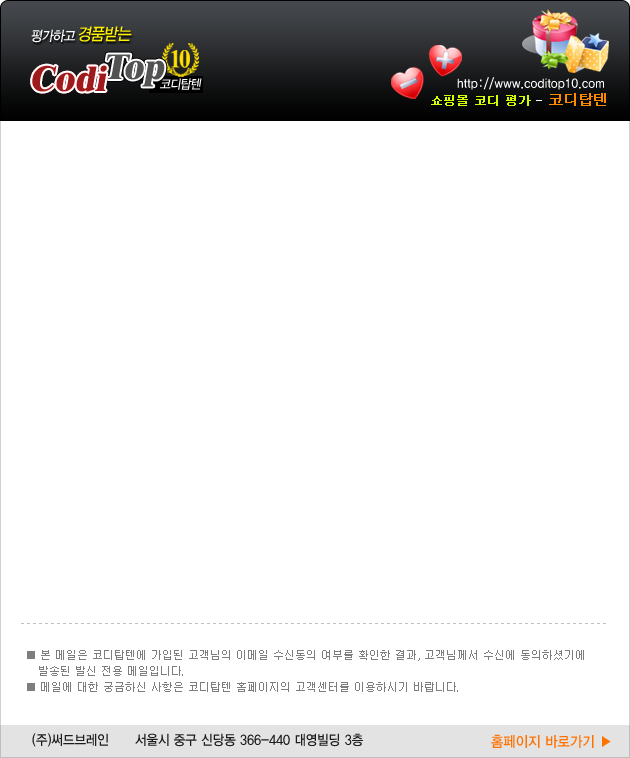
<style>
.page{position:relative;width:630px;height:758px;background:#ffffff}
.page>*{position:absolute;margin:0}
.t1{font:14px "YDIYGO330";letter-spacing:-0.05em;color:#ffffff;font-style:italic;scale:0.9 1}
.t2{font:17px "YDIYGO330";letter-spacing:-0.05em;color:#fff000;font-style:italic;scale:0.9 1}
.t3{font:36px "Dutch801BT-ExtraBold";color:#9e1b1d;font-style:italic}
.t4{font:13px "YDIYGO330";letter-spacing:-0.05em;color:#ffffff;font-style:italic;scale:0.9 1}
.t5{font:12.7px "YDIYGO330";letter-spacing:0.025em;color:#ffffff;scale:0.91 1}
.t6{font:12px "Dotum";color:#d2ff00;font-weight:bold}
.t7{font:11px "Dotum";color:#ffffff;font-weight:bold}
.t8{font:14px "Dotum";color:#ff8a00;font-weight:bold}
.t9{font:11px/16px "Dotum";color:#7d7d7d}
.t10{font:13.8px "YDIYGO330";color:#1d1d1d;scale:0.91 1}
.t11{font:14.8px "YDIYGO330";color:#ff7200;scale:0.91 1}
</style>
<div class="page">
<p class="t1" style="left:31px;top:29px;width:44px;height:14px">평가하고</p>
<p class="t2" style="left:78px;top:26px;width:54px;height:16px">경품받는</p>
<p class="t3" style="left:32px;top:65px;width:75px;height:27px">Codi</p>
<p class="t3" style="left:32px;top:65px;width:75px;height:27px">Codi</p>
<p class="t4" style="left:160px;top:78px;width:42px;height:12px">코디탑텐</p>
<p class="t5" style="left:457px;top:77px;width:147px;height:13px">http://www.coditop10.com</p>
<p class="t6" style="left:431px;top:93px;width:175px;height:13px">쇼핑몰 코디 평가 <span class="t7">- </span><span class="t8">코디탑텐</span></p>
<p class="t9" style="left:27px;top:650px;width:557px;height:42px">■ 본 메일은 코디탑텐에 가입된 고객님의 이메일 수신동의 여부를 확인한 결과, 고객님께서 수신에 동의하셨기에 <br>   발송된 발신 전용 메일입니다.   <br>■ 메일에 대한 궁금하신 사항은 코디탑텐 홈페이지의 고객센터를 이용하시기 바랍니다.</p>
<p class="t10" style="left:32px;top:733px;width:331px;height:14px">(주)써드브레인      서울시 중구 신당동 366-440 대영빌딩 3층</p>
<p class="t11" style="left:491px;top:734px;width:120px;height:14px">홈페이지 바로가기 ▶</p>
</div>
